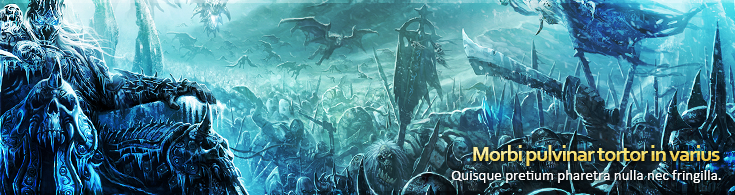
<style>
.page{position:relative;width:735px;height:195px}
.page>*{position:absolute;margin:0}
.t1{font:22px "Corbel-Bold";letter-spacing:-0.05em}
.t2{font:15px "Calibri";color:#ffffff}
</style>
<div class="page">
<p class="t1" style="left:473px;top:145px;width:247px;height:21px">Morbi pulvinar tortor in varius</p>
<p class="t1" style="left:473px;top:145px;width:247px;height:21px">Morbi pulvinar tortor in varius</p>
<p class="t2" style="left:451px;top:170px;width:270px;height:13px">Quisque pretium pharetra nulla nec fringilla.</p>
<p class="t2" style="left:451px;top:170px;width:270px;height:13px">Quisque pretium pharetra nulla nec fringilla.</p>
</div>
